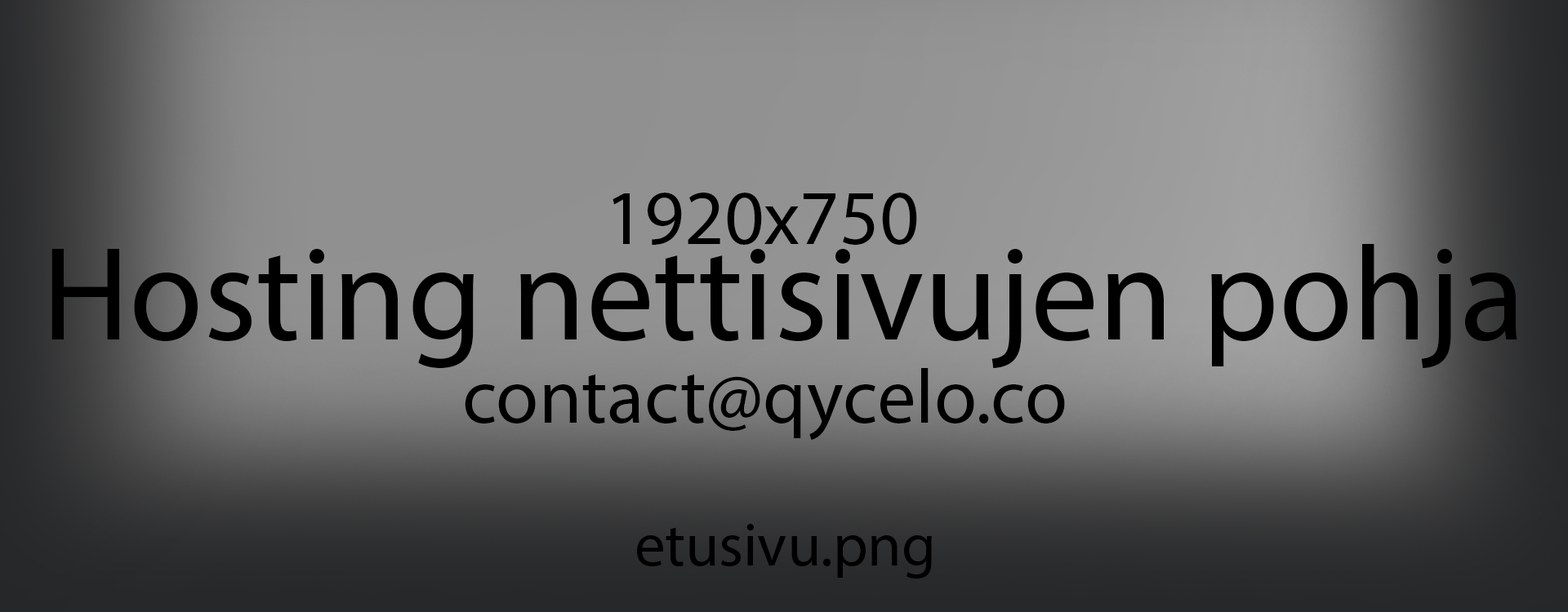
<style>
.page{position:relative;width:1568px;height:612px}
.page>*{position:absolute;margin:0}
.t1{font:77.6px "MyriadPro-Regular";color:#000000}
.t2{font:134.8px "MyriadPro-Regular";color:#000000}
.t3{font:61.2px "MyriadPro-Regular";color:#000000}
</style>
<div class="page">
<p class="t1" style="left:612px;top:193px;width:305px;height:52px">1920x750</p>
<p class="t2" style="left:51px;top:244px;width:1466px;height:125px">Hosting nettisivujen pohja</p>
<p class="t1" style="left:465px;top:368px;width:600px;height:72px">contact@qycelo.co</p>
<p class="t3" style="left:637px;top:524px;width:295px;height:55px">etusivu.png</p>
</div>
